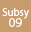
<style>
.page{position:relative;width:31px;height:32px;background:#c69c6d}
.page>*{position:absolute;margin:0}
.t1{font:10.7px "MyriadPro-Regular";color:#ffffff}
.t2{font:13.3px "MyriadPro-Regular";color:#ffffff}
</style>
<div class="page">
<p class="t1" style="left:2px;top:8px;width:27px;height:11px">Subsy</p>
<p class="t2" style="left:9px;top:18px;width:13px;height:9px">09</p>
</div>
